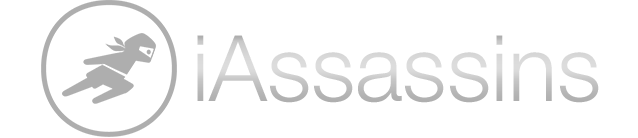
<style>
.page{position:relative;width:638px;height:138px;background:#ffffff}
.page>*{position:absolute;margin:0}
.t1{font:91.7px "HelveticaNeue-Light";color:#cccccc}
</style>
<div class="page">
<p class="t1" style="left:197px;top:35px;width:402px;height:68px">iAssassins</p>
</div>
